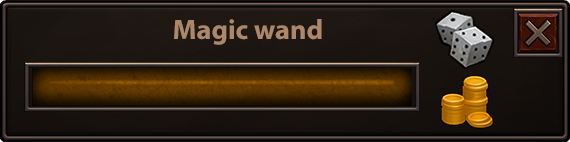
<style>
.page{position:relative;width:570px;height:142px}
.page>*{position:absolute;margin:0}
.t1{font:28.1px "MyriadPro-Bold";color:#ac876a}
</style>
<div class="page">
<p class="t1" style="left:174px;top:19px;width:148px;height:26px">Magic wand</p>
</div>
